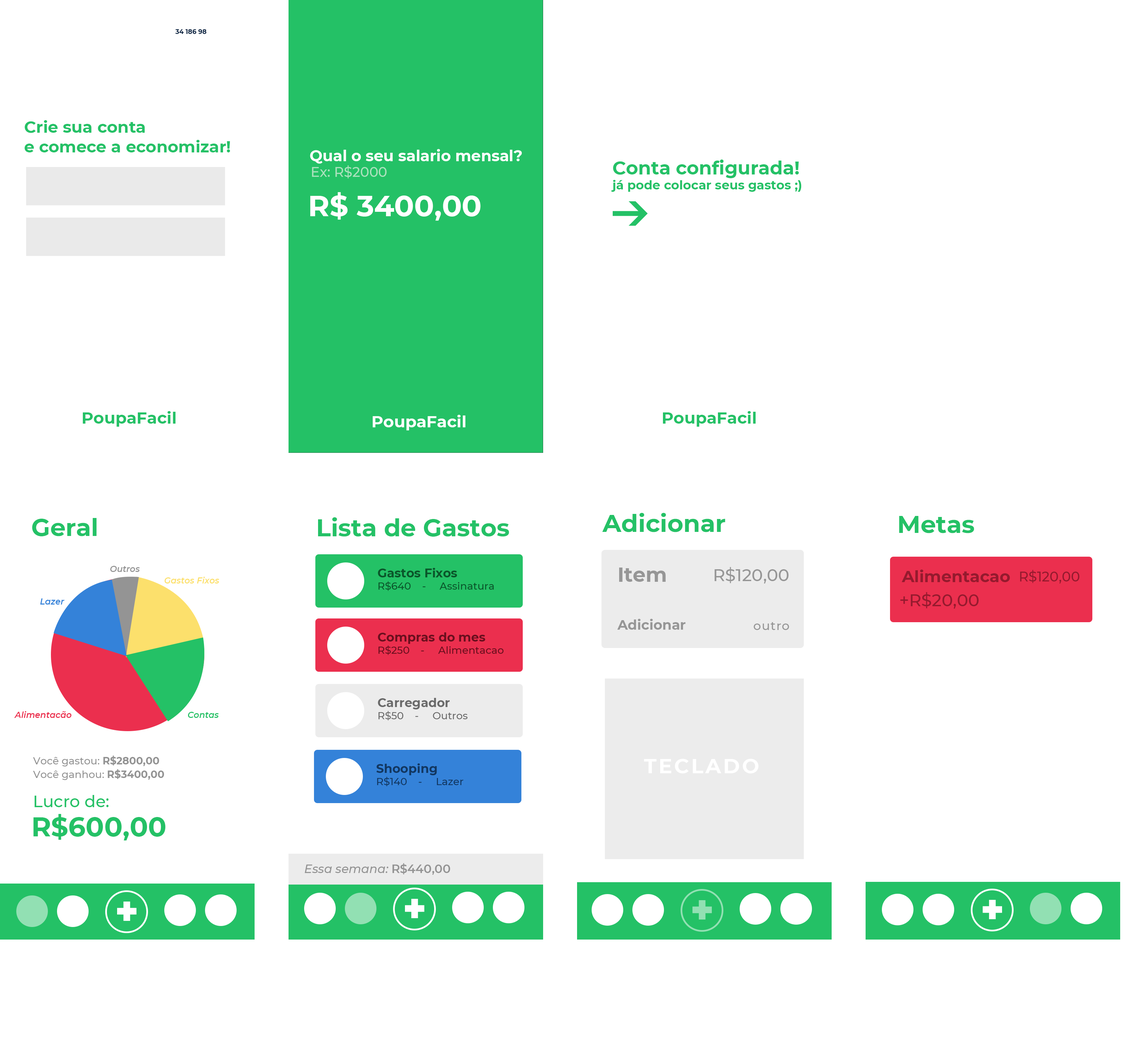
<style>
.page{position:relative;width:1129px;height:1057px;background:#ffffff}
.page>*{position:absolute;margin:0}
.t1{font:6.5px "Montserrat-Bold";color:#0d2644}
.t2{font:16.3px "Montserrat-Bold";color:#24c166}
.t3{font:15.3px "Montserrat-Bold";color:#ffffff}
.t4{font:12.4px "Montserrat-Bold";color:#24c166}
.t5{font:18.6px "Montserrat-Bold";color:#24c166}
.t6{font:13.6px "Montserrat-Medium";color:#aae1bd}
.t7{font:29.4px "Montserrat-Bold";color:#ffffff}
.t8{font:16.3px "Montserrat-Bold";color:#ffffff}
.t9{font:24.4px "Montserrat-Bold";color:#24c166}
.t10{font:8.5px "Montserrat-SemiBoldItalic";color:#949494}
.t11{font:10.2px "Montserrat-Medium";color:#0a562a}
.t12{font:12.2px "Montserrat-Bold";color:#0a562a}
.t13{font:20.4px "Montserrat-Bold";color:#969696}
.t14{font:17px "Montserrat-Medium";color:#969696}
.t15{font:16.3px "Montserrat-Bold";color:#951a2e}
.t16{font:13.6px "Montserrat-Medium";color:#951a2e}
.t17{font:8.5px "Montserrat-SemiBoldItalic";color:#fce06c}
.t18{font:17px "Montserrat-Medium";color:#951a2e}
.t19{font:8.5px "Montserrat-SemiBoldItalic";color:#3482d9}
.t20{font:13.6px "Montserrat-Bold";color:#969696}
.t21{font:12.2px "Montserrat-Medium";letter-spacing:0.05em;color:#969696}
.t22{font:10.2px "Montserrat-Medium";color:#6a0f1e}
.t23{font:12.2px "Montserrat-Bold";color:#6a0f1e}
.t24{font:10.2px "Montserrat-Medium";color:#6a6a6a}
.t25{font:12.2px "Montserrat-Bold";color:#6a6a6a}
.t26{font:8.5px "Montserrat-SemiBoldItalic";color:#eb2f4e}
.t27{font:8.5px "Montserrat-SemiBoldItalic";color:#24c166}
.t28{font:10.2px/13.6px "Montserrat-Medium";color:#939393}
.t29{font:10.2px/13.6px "Montserrat-Bold";color:#939393}
.t30{font:20.4px "Montserrat-Bold";letter-spacing:0.1em;color:#ffffff}
.t31{font:10.2px "Montserrat-Medium";color:#123761}
.t32{font:12.2px "Montserrat-Bold";color:#123761}
.t33{font:16.3px "Montserrat-Medium";color:#24c166}
.t34{font:27.1px "Montserrat-Bold";color:#24c166}
.t35{font:11.9px "Montserrat-MediumItalic";color:#939393}
.t36{font:11.9px "Montserrat-SemiBold";color:#939393}
</style>
<div class="page">
<p class="t1" style="left:175px;top:29px;width:31px;height:5px">34 186 98</p>
<p class="t2" style="left:24px;top:120px;width:206px;height:32px">Crie sua conta <br>e comece a economizar!</p>
<p class="t3" style="left:310px;top:149px;width:212px;height:15px">Qual o seu salario mensal?</p>
<p class="t4" style="left:611px;top:159px;width:190px;height:33px"><span class="t5">Conta configurada!<br></span>já pode colocar seus gastos ;)</p>
<p class="t6" style="left:312px;top:165px;width:74px;height:13px">Ex: R$2000</p>
<p class="t7" style="left:310px;top:192px;width:170px;height:29px">R$ 3400,00</p>
<p class="t2" style="left:83px;top:411px;width:92px;height:16px">PoupaFacil</p>
<p class="t2" style="left:663px;top:411px;width:92px;height:16px">PoupaFacil</p>
<p class="t8" style="left:373px;top:415px;width:92px;height:15px">PoupaFacil</p>
<p class="t9" style="left:32px;top:518px;width:65px;height:18px">Geral</p>
<p class="t9" style="left:318px;top:517px;width:191px;height:19px">Lista de Gastos</p>
<p class="t9" style="left:602px;top:513px;width:123px;height:19px">Adicionar</p>
<p class="t9" style="left:899px;top:516px;width:75px;height:17px">Metas</p>
<p class="t10" style="left:110px;top:566px;width:30px;height:6px">Outros</p>
<p class="t11" style="left:378px;top:568px;width:116px;height:23px"><span class="t12">Gastos Fixos<br></span>R$640    -     Assinatura</p>
<p class="t13" style="left:619px;top:567px;width:46px;height:15px">Item</p>
<p class="t14" style="left:714px;top:567px;width:74px;height:16px">R$120,00</p>
<p class="t15" style="left:901px;top:569px;width:108px;height:13px">Alimentacao</p>
<p class="t16" style="left:1020px;top:570px;width:59px;height:13px">R$120,00</p>
<p class="t17" style="left:164px;top:576px;width:55px;height:7px">Gastos Fixos</p>
<p class="t18" style="left:900px;top:592px;width:78px;height:16px">+R$20,00</p>
<p class="t19" style="left:40px;top:598px;width:24px;height:6px">Lazer</p>
<p class="t20" style="left:617px;top:619px;width:68px;height:10px">Adicionar</p>
<p class="t21" style="left:753px;top:622px;width:36px;height:8px">outro</p>
<p class="t22" style="left:378px;top:632px;width:126px;height:23px"><span class="t23">Compras do mes<br></span>R$250    -     Alimentacao</p>
<p class="t24" style="left:378px;top:698px;width:90px;height:22px"><span class="t25">Carregador<br></span>R$50    -     Outros</p>
<p class="t26" style="left:14px;top:711px;width:58px;height:7px">Alimentacão</p>
<p class="t27" style="left:188px;top:712px;width:31px;height:6px">Contas</p>
<p class="t28" style="left:33px;top:755px;width:131px;height:25px">Você gastou: <span class="t29">R$2800,00<br></span>Você ganhou: <span class="t29">R$3400,00</span></p>
<p class="t30" style="left:644px;top:758px;width:114px;height:15px">TECLADO</p>
<p class="t31" style="left:376px;top:763px;width:87px;height:23px"><span class="t32">Shooping<br></span>R$140    -     Lazer</p>
<p class="t33" style="left:35px;top:795px;width:74px;height:12px">Lucro de:</p>
<p class="t34" style="left:33px;top:814px;width:133px;height:26px">R$600,00</p>
<p class="t35" style="left:304px;top:863px;width:146px;height:11px">Essa semana: <span class="t36">R$440,00</span></p>
</div>
